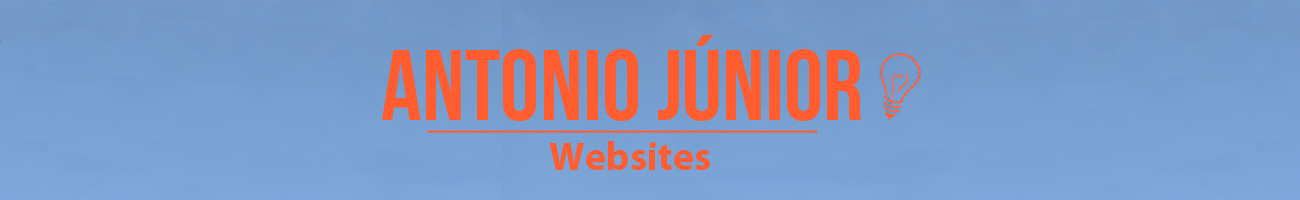
<style>
.page{position:relative;width:1300px;height:200px}
.page>*{position:absolute;margin:0}
.t1{font:100px "BebasNeue";color:#ff5d2f}
.t2{font:40px "MyriadPro-Bold";color:#ff5d2f}
</style>
<div class="page">
<p class="t1" style="left:382px;top:35px;width:480px;height:86px">ANTONIO JÚNIOR</p>
<p class="t2" style="left:549px;top:141px;width:161px;height:29px">Websites</p>
</div>
